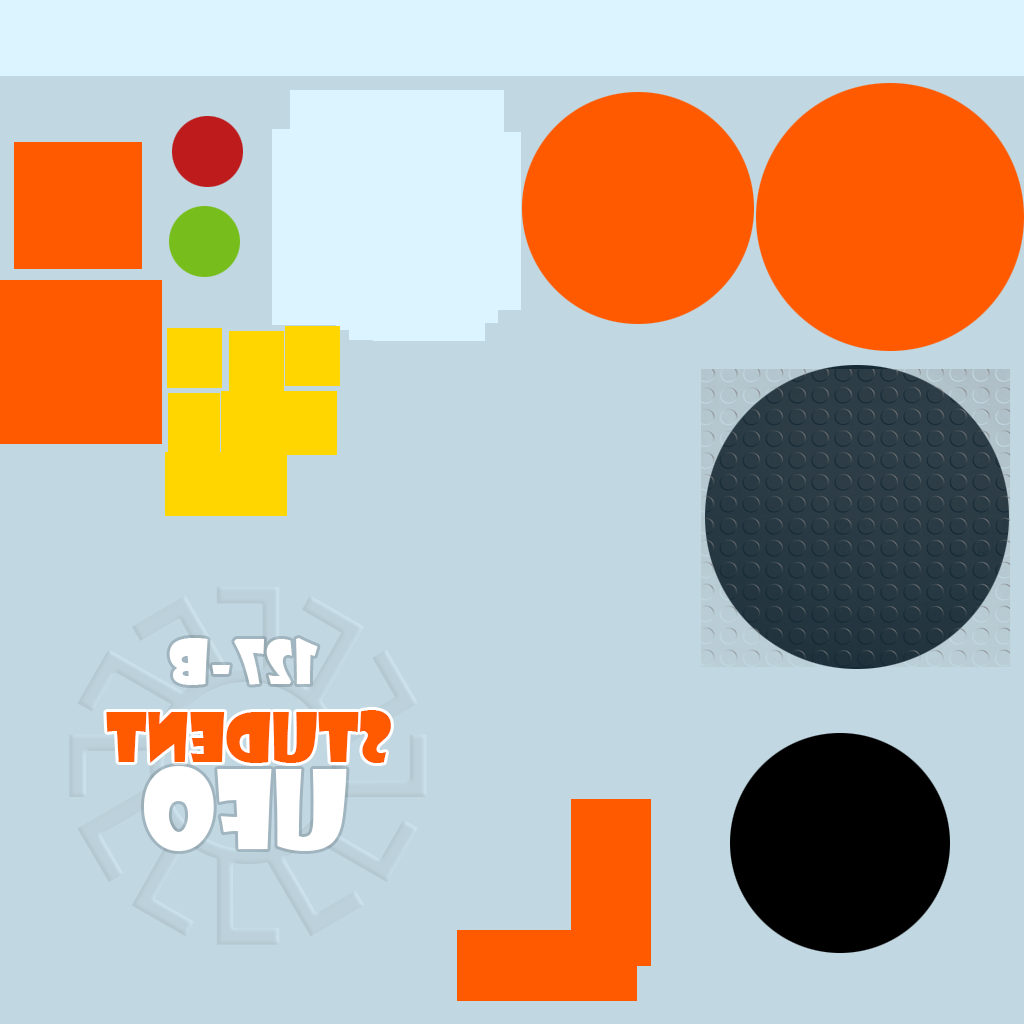
<style>
.page{position:relative;width:1024px;height:1024px;background:#c1d7e1}
.page>*{position:absolute;margin:0}
.t1{font:60px "ShowcardGothic-Reg";color:#ffffff;font-variant:small-caps}
.t2{font:94.1px "ShowcardGothic-Reg";color:#ff5a00;font-variant:small-caps}
.t3{font:106.7px "ShowcardGothic-Reg";color:#ffffff;font-variant:small-caps}
</style>
<div class="page">
<p class="t1" style="left:169px;top:638px;width:149px;height:47px;rotate:180deg">127-B</p>
<p class="t2" style="left:106px;top:710px;width:285px;height:53px;rotate:180deg">student</p>
<p class="t3" style="left:143px;top:766px;width:204px;height:85px;rotate:180deg">UFO</p>
</div>
